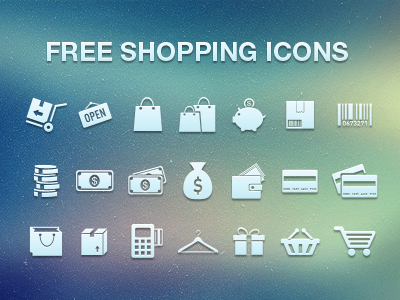
<style>
.page{position:relative;width:400px;height:300px}
.page>*{position:absolute;margin:0}
.t1{font:26px "HelveticaNeue-Bold";color:#def5fb}
</style>
<div class="page">
<p class="t1" style="left:47px;top:42px;width:301px;height:19px">FREE SHOPPING ICONS</p>
</div>
